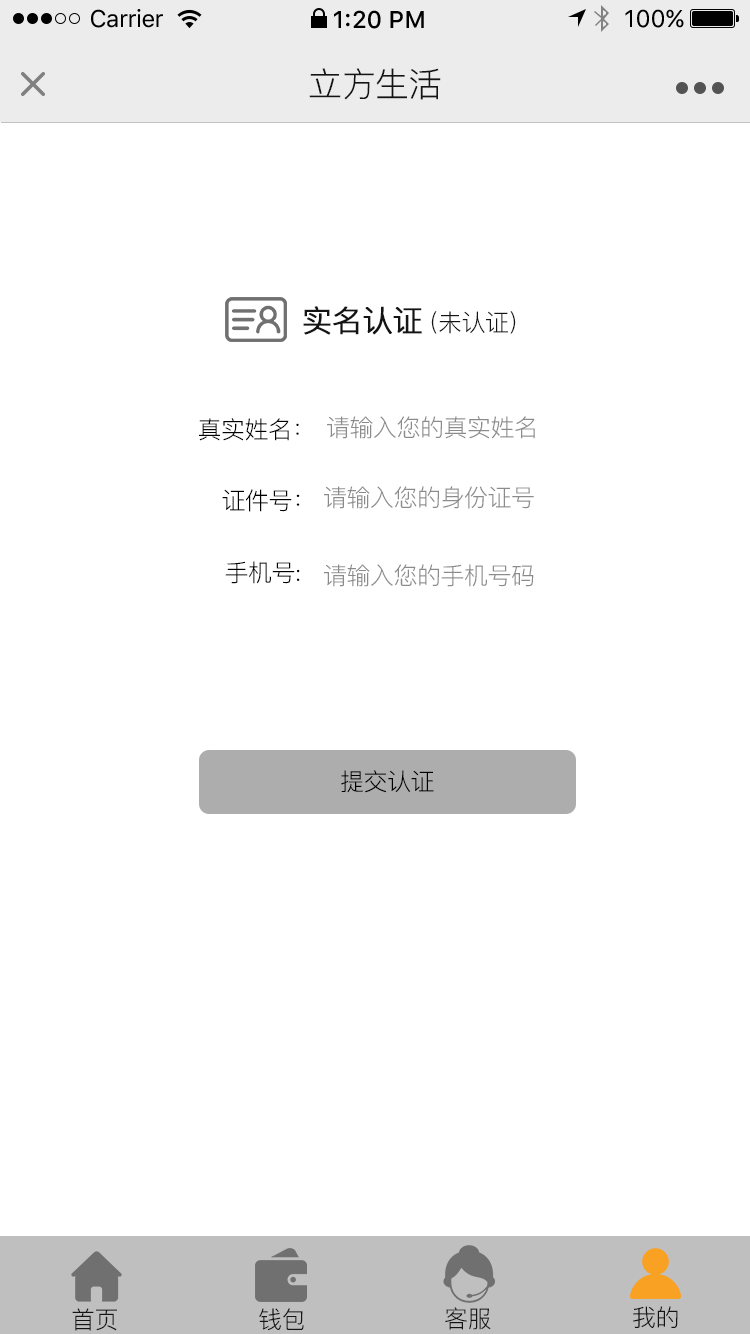
<style>
.page{position:relative;width:750px;height:1334px;background:#ffffff}
.page>*{position:absolute;margin:0}
.t1{font:24px "SFUIText-Regular";letter-spacing:-0.025em;color:#000000}
.t2{font:24px "SFUIText-Medium";color:#000000}
.t3{font:24px "SFUIText-Regular";color:#000000}
.t4{font:34px "PingFang-SC-Regular";letter-spacing:-0.02em;color:#141414}
.t5{font:30px "PingFang-SC-Regular";letter-spacing:-0.02em;color:#141414;font-weight:bold}
.t6{font:24px "PingFang-SC-Regular";letter-spacing:-0.02em;color:#141414}
.t7{font:24px "PingFang-SC-Regular";letter-spacing:-0.02em;color:#000000}
.t8{font:24px "PingFang-SC-Regular";letter-spacing:-0.02em;color:#8b8b8b}
</style>
<div class="page">
<p class="t1" style="left:91px;top:9px;width:72px;height:19px">Carrier</p>
<p class="t2" style="left:334px;top:10px;width:90px;height:19px">1:20 PM</p>
<p class="t3" style="left:625px;top:9px;width:59px;height:19px">100%</p>
<p class="t4" style="left:309px;top:68px;width:132px;height:32px">立方生活</p>
<p class="t5" style="left:303px;top:306px;width:119px;height:29px">实名认证</p>
<p class="t6" style="left:431px;top:311px;width:85px;height:23px">（未认证）</p>
<p class="t7" style="left:199px;top:418px;width:100px;height:23px">真实姓名：</p>
<p class="t8" style="left:327px;top:416px;width:208px;height:23px">请输入您的真实姓名</p>
<p class="t8" style="left:324px;top:486px;width:210px;height:23px">请输入您的身份证号</p>
<p class="t7" style="left:222px;top:489px;width:78px;height:23px">证件号：</p>
<p class="t7" style="left:225px;top:561px;width:75px;height:23px">手机号:</p>
<p class="t8" style="left:324px;top:564px;width:210px;height:23px">请输入您的手机号码</p>
<p class="t7" style="left:341px;top:770px;width:93px;height:23px">提交认证</p>
<p class="t6" style="left:72px;top:1308px;width:45px;height:23px">首页</p>
<p class="t6" style="left:259px;top:1308px;width:45px;height:23px">钱包</p>
<p class="t6" style="left:445px;top:1307px;width:46px;height:23px">客服</p>
<p class="t6" style="left:633px;top:1306px;width:45px;height:22px">我的</p>
</div>
